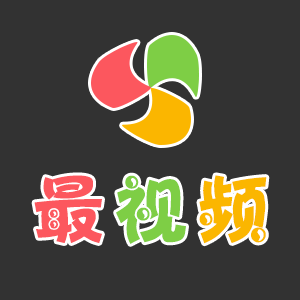
<style>
.page{position:relative;width:300px;height:300px;background:#323232}
.page>*{position:absolute;margin:0}
.t1{font:75px "HYo3gj";letter-spacing:0.1em;color:#fc575e}
.t2{font:75px "HYo3gj";letter-spacing:0.1em;color:#7ece45}
.t3{font:75px "HYo3gj";letter-spacing:0.1em;color:#fbb600}
</style>
<div class="page">
<p class="t1" style="left:34px;top:175px;width:233px;height:69px">最<span class="t2">视</span><span class="t3">频</span></p>
</div>
